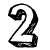
<style>
.page{position:relative;width:50px;height:50px;background:#ffffff}
.page>*{position:absolute;margin:0}
.t1{font:57.6px "Pointy";letter-spacing:-0.025em;color:#000000;scale:1.04 1}
</style>
<div class="page">
<p class="t1" style="left:8px;top:3px;width:31px;height:45px">2</p>
</div>
